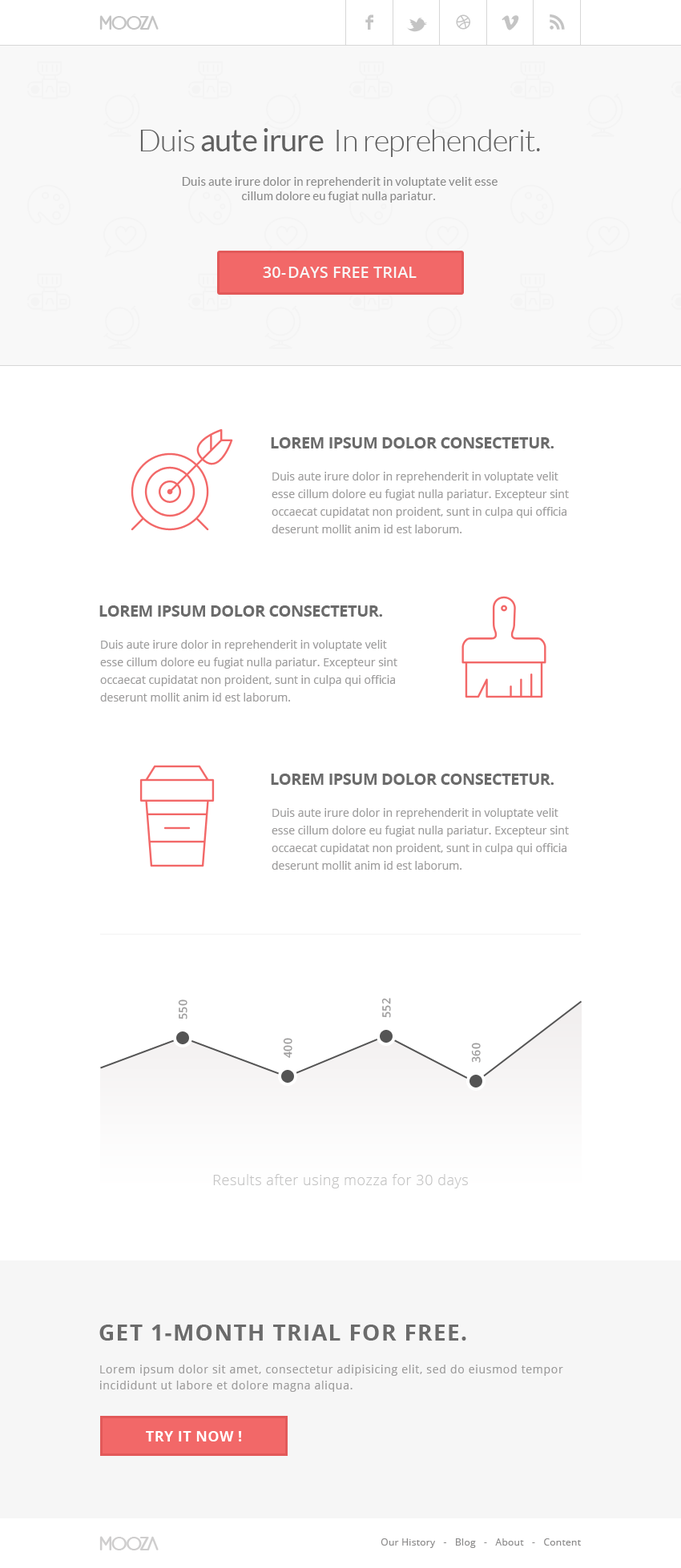
<style>
.page{position:relative;width:681px;height:1568px;background:#ffffff}
.page>*{position:absolute;margin:0}
.t1{font:24px "bioliquid-Regular";letter-spacing:-0.025em;color:#c4c4c4}
.t2{font:24px "bioliquid-Regular";letter-spacing:-0.085em;color:#c4c4c4}
.t3{font:24px "Socialico";letter-spacing:-0.025em;color:#c4c4c4}
.t4{font:29.6px "Socialico";letter-spacing:-0.025em;color:#c4c4c4}
.t5{font:30.4px "Lato-Light";letter-spacing:-0.025em;color:#616060}
.t6{font:30.4px "Lato-Regular";letter-spacing:-0.025em;color:#616060}
.t7{font:12px "Lato-Regular";letter-spacing:0.005em;color:#8a8a8a}
.t8{font:16px "OpenSans-Semibold";color:#f8f8f8;text-transform:uppercase}
.t9{font:16px "OpenSans-Semibold";letter-spacing:0.1em;color:#f8f8f8;text-transform:uppercase}
.t10{font:16px "OpenSans-Bold";letter-spacing:-0.025em;color:#6b6b6b;text-transform:uppercase}
.t11{font:11.2px/17.6px "OpenSans";color:#9d9c9c}
.t12{font:11.2px "OpenSans-Semibold";letter-spacing:0.05em;color:#9d9c9c;text-transform:uppercase}
.t13{font:14.4px "OpenSans-Light";letter-spacing:0.03em;color:#c4c4c4}
.t14{font:22.4px "OpenSans-Bold";letter-spacing:0.05em;color:#6b6b6b;text-transform:uppercase}
.t15{font:11.2px/16px "OpenSans";letter-spacing:0.05em;color:#9d9c9c}
.t16{font:14.4px "OpenSans-Bold";letter-spacing:0.025em;color:#ffffff;text-transform:uppercase}
.t17{font:24px "bioliquid-Regular";letter-spacing:-0.025em;color:#cfcece}
.t18{font:24px "bioliquid-Regular";letter-spacing:-0.085em;color:#cfcece}
.t19{font:9.6px "OpenSans";letter-spacing:0.025em;color:#8c8b8b}
</style>
<div class="page">
<p class="t1" style="left:99px;top:15px;width:60px;height:15px">mo<span class="t2">oz</span>a</p>
<p class="t3" style="left:365px;top:14px;width:8px;height:16px">F</p>
<p class="t4" style="left:406px;top:18px;width:21px;height:14px">L</p>
<p class="t3" style="left:456px;top:14px;width:14px;height:16px">D</p>
<p class="t3" style="left:501px;top:15px;width:18px;height:15px">V</p>
<p class="t3" style="left:549px;top:14px;width:16px;height:16px">R</p>
<p class="t5" style="left:140px;top:128px;width:400px;height:29px">Duis <span class="t6">aute irure</span>  In reprehenderit.</p>
<p class="t7" style="left:182px;top:177px;width:315px;height:26px;text-align:center">Duis aute irure dolor in reprehenderit in voluptate velit esse<br>cillum dolore eu fugiat nulla pariatur.</p>
<p class="t8" style="left:263px;top:267px;width:153px;height:11px">30<span class="t9">-</span>days free trial</p>
<p class="t10" style="left:271px;top:437px;width:282px;height:11px">Lorem ipsum dolor consectetur.</p>
<p class="t11" style="left:271px;top:472px;width:298px;height:61px">Duis aute irure dolor in reprehenderit in voluptate velit esse cillum dolore eu fugiat nulla pariatur. Excepteur sint occaecat cupidatat non proident, sunt in culpa qui officia deserunt mollit anim id est laborum.</p>
<p class="t10" style="left:99px;top:605px;width:283px;height:12px">Lorem ipsum dolor consectetur.</p>
<p class="t11" style="left:100px;top:640px;width:297px;height:62px">Duis aute irure dolor in reprehenderit in voluptate velit esse cillum dolore eu fugiat nulla pariatur. Excepteur sint occaecat cupidatat non proident, sunt in culpa qui officia deserunt mollit anim id est laborum.</p>
<p class="t10" style="left:271px;top:774px;width:282px;height:11px">Lorem ipsum dolor consectetur.</p>
<p class="t11" style="left:271px;top:808px;width:298px;height:62px">Duis aute irure dolor in reprehenderit in voluptate velit esse cillum dolore eu fugiat nulla pariatur. Excepteur sint occaecat cupidatat non proident, sunt in culpa qui officia deserunt mollit anim id est laborum.</p>
<p class="t12" style="left:178px;top:999px;width:9px;height:20px;rotate:-90deg">550</p>
<p class="t12" style="left:381px;top:998px;width:10px;height:20px;rotate:-90deg">552</p>
<p class="t12" style="left:283px;top:1038px;width:9px;height:20px;rotate:-90deg">400</p>
<p class="t12" style="left:471px;top:1043px;width:9px;height:20px;rotate:-90deg">360</p>
<p class="t13" style="left:213px;top:1174px;width:255px;height:14px">Results after using mozza for 30 days</p>
<p class="t14" style="left:99px;top:1325px;width:367px;height:16px">Get 1-month trial for Free.</p>
<p class="t15" style="left:100px;top:1365px;width:463px;height:27px">Lorem ipsum dolor sit amet, consectetur adipisicing elit, sed do eiusmod tempor incididunt ut labore et dolore magna aliqua.</p>
<p class="t16" style="left:146px;top:1431px;width:96px;height:10px">Try It Now !</p>
<p class="t17" style="left:99px;top:1536px;width:60px;height:14px">mo<span class="t18">oz</span>a</p>
<p class="t19" style="left:380px;top:1538px;width:201px;height:10px">Our History   -   Blog   -   About   -   Content</p>
</div>
